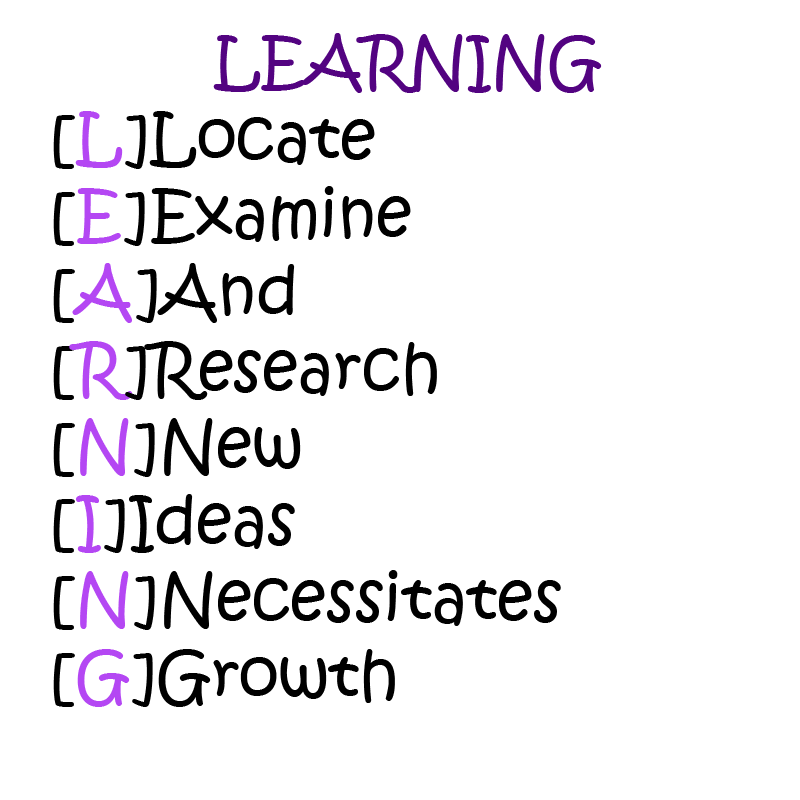
<style>
.page{position:relative;width:800px;height:800px;background:#ffffff}
.page>*{position:absolute;margin:0}
.t1{font:64px "KristenITC-Regular";color:#000000}
.t2{font:64px "Stencil";color:#2cc15a}
.t3{font:64px "KristenITC-Regular";color:#530381}
.t4{font:64px "KristenITC-Regular";color:#b447f3}
</style>
<div class="page">
<p class="t1" style="left:53px;top:33px;width:549px;height:674px"><span class="t2">         </span><span class="t3">LEARNING<br></span>[<span class="t4">L</span>]Locate <br>[<span class="t4">E</span>]Examine <br>[<span class="t4">A</span>]And <br>[<span class="t4">R</span>]Research <br>[<span class="t4">N</span>]New <br>[<span class="t4">I</span>]Ideas <br>[<span class="t4">N</span>]Necessitates <br>[<span class="t4">G</span>]Growth</p>
</div>
